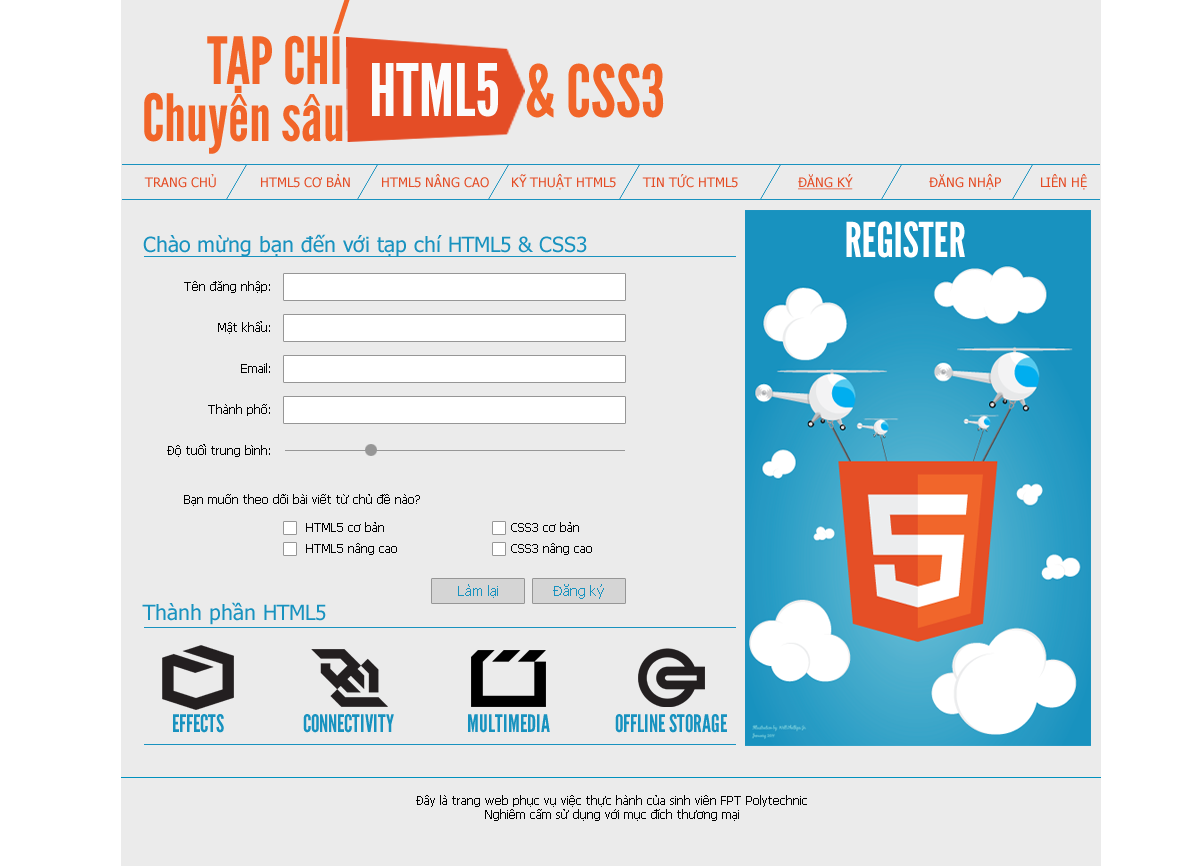
<style>
.page{position:relative;width:1200px;height:866px;background:#ebebeb}
.page>*{position:absolute;margin:0}
.t1{font:13px "Tahoma";color:#e44d26}
.t2{font:13px "Tahoma";color:#e44d26;text-decoration:underline}
.t3{font:48px "LeagueGothic";color:#ffffff}
.t4{font:21px "Tahoma";color:#1892bf}
.t5{font:12px "Tahoma";color:#000000}
.t6{font:14px "Tahoma";color:#1892bf}
</style>
<div class="page">
<p class="t1" style="left:144px;top:174px;width:72px;height:14px">TRANG CHỦ</p>
<p class="t1" style="left:261px;top:174px;width:89px;height:14px">HTML5 CƠ BẢN</p>
<p class="t1" style="left:382px;top:174px;width:107px;height:14px">HTML5 NÂNG CAO</p>
<p class="t1" style="left:512px;top:174px;width:104px;height:16px">KỸ THUẬT HTML5</p>
<p class="t1" style="left:642px;top:174px;width:96px;height:14px">TIN TỨC HTML5</p>
<p class="t2" style="left:798px;top:174px;width:55px;height:16px">ĐĂNG KÝ</p>
<p class="t1" style="left:929px;top:174px;width:72px;height:16px">ĐĂNG NHẬP</p>
<p class="t1" style="left:1041px;top:174px;width:46px;height:16px">LIÊN HỆ</p>
<p class="t3" style="left:846px;top:221px;width:119px;height:37px">REGISTER</p>
<p class="t4" style="left:143px;top:234px;width:444px;height:23px">Chào mừng bạn đến với tạp chí HTML5 &amp; CSS3</p>
<p class="t5" style="left:184px;top:281px;width:86px;height:12px">Tên đăng nhập:</p>
<p class="t5" style="left:218px;top:321px;width:52px;height:13px">Mật khẩu:</p>
<p class="t5" style="left:241px;top:363px;width:29px;height:10px">Email:</p>
<p class="t5" style="left:208px;top:404px;width:62px;height:12px">Thành phố:</p>
<p class="t5" style="left:167px;top:444px;width:103px;height:13px">Độ tuổi trung bình:</p>
<p class="t5" style="left:184px;top:494px;width:236px;height:12px">Bạn muốn theo dõi bài viết từ chủ đề nào?</p>
<p class="t5" style="left:306px;top:522px;width:78px;height:10px">HTML5 cơ bản</p>
<p class="t5" style="left:511px;top:522px;width:68px;height:10px">CSS3 cơ bản</p>
<p class="t5" style="left:306px;top:543px;width:91px;height:12px">HTML5 nâng cao</p>
<p class="t5" style="left:511px;top:543px;width:81px;height:12px">CSS3 nâng cao</p>
<p class="t6" style="left:458px;top:584px;width:40px;height:14px">Làm lại</p>
<p class="t6" style="left:553px;top:584px;width:51px;height:15px">Đăng ký</p>
<p class="t4" style="left:142px;top:602px;width:184px;height:23px">Thành phần HTML5</p>
<p class="t5" style="left:416px;top:795px;width:391px;height:26px;text-align:center">Đây là trang web phục vụ việc thực hành của sinh viên FPT Polytechnic<br>Nghiêm cấm sử dụng với mục đích thương mại</p>
</div>
